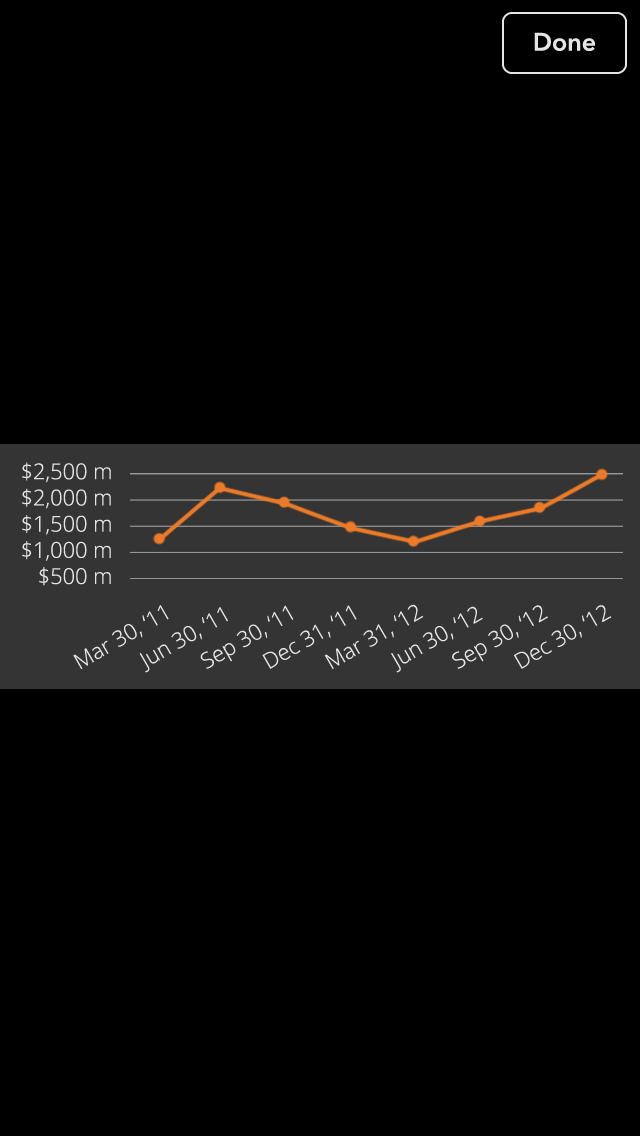
<style>
.page{position:relative;width:640px;height:1136px;background:#000000}
.page>*{position:absolute;margin:0}
.t1{font:25px "AvenirNext-DemiBold";color:#e5e5e5}
.t2{font:21.8px "OpenSans-Light";color:#e5e5e5}
</style>
<div class="page">
<p class="t1" style="left:534px;top:32px;width:61px;height:19px">Done</p>
<p class="t2" style="left:22px;top:462px;width:89px;height:124px;text-align:right">$2,500 m<br>$2,000 m<br>$1,500 m<br>$1,000 m<br>$500 m</p>
<p class="t2" style="left:73px;top:605px;width:96px;height:64px;rotate:-30deg">Mar 30, ‘11</p>
<p class="t2" style="left:200px;top:605px;width:94px;height:64px;rotate:-30deg">Sep 30, ‘11</p>
<p class="t2" style="left:262px;top:605px;width:95px;height:64px;rotate:-30deg">Dec 31, ‘11</p>
<p class="t2" style="left:324px;top:604px;width:100px;height:65px;rotate:-30deg">Mar 31, ‘12</p>
<p class="t2" style="left:391px;top:606px;width:92px;height:67px;rotate:-30deg">Jun 30, ‘12</p>
<p class="t2" style="left:452px;top:605px;width:96px;height:64px;rotate:-30deg">Sep 30, ‘12</p>
<p class="t2" style="left:514px;top:605px;width:98px;height:64px;rotate:-30deg">Dec 30, ‘12</p>
<p class="t2" style="left:139px;top:607px;width:89px;height:66px;rotate:-30deg">Jun 30, ‘11</p>
</div>
